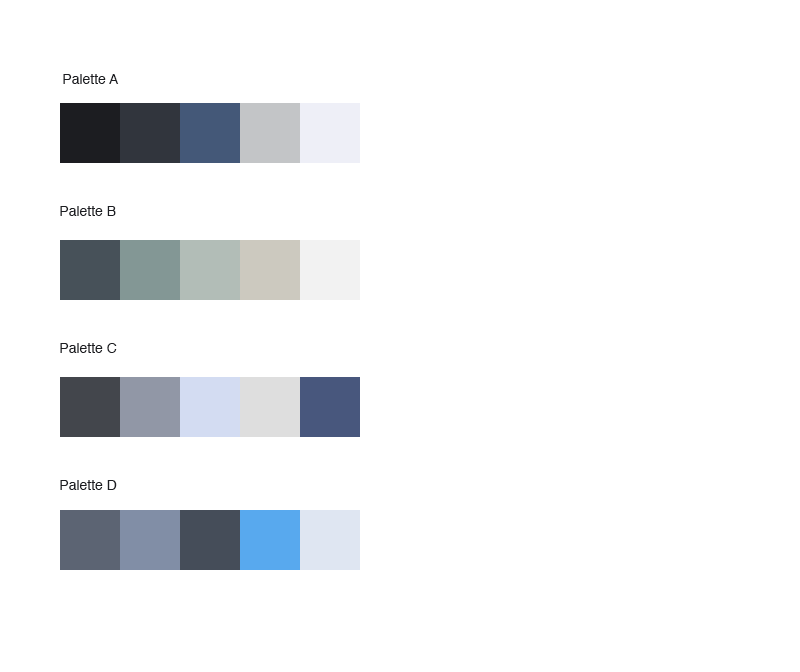
<style>
.page{position:relative;width:800px;height:672px;background:#ffffff}
.page>*{position:absolute;margin:0}
.t1{font:14px "Helvetica";color:#1c1d21}
</style>
<div class="page">
<p class="t1" style="left:63px;top:74px;width:56px;height:10px">Palette A</p>
<p class="t1" style="left:60px;top:206px;width:56px;height:10px">Palette B</p>
<p class="t1" style="left:60px;top:343px;width:57px;height:10px">Palette C</p>
<p class="t1" style="left:60px;top:480px;width:57px;height:10px">Palette D</p>
</div>
